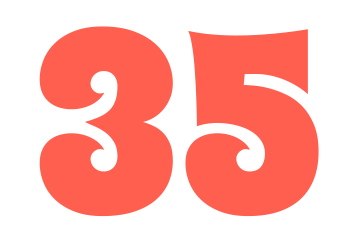
<style>
.page{position:relative;width:354px;height:236px;background:#ffffff}
.page>*{position:absolute;margin:0}
.t1{font:250px "SpicyRice-Regular";color:#ff5f4e}
</style>
<div class="page">
<p class="t1" style="left:39px;top:26px;width:280px;height:191px">35</p>
</div>
